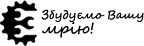
<style>
.page{position:relative;width:144px;height:46px;background:#ffffff}
.page>*{position:absolute;margin:0}
.t1{font:11.7px "SegoeScript";color:#000000}
.t2{font:15.4px "SegoeScript";color:#000000}
</style>
<div class="page">
<p class="t1" style="left:41px;top:9px;width:103px;height:13px">Збудуємо Вашу</p>
<p class="t2" style="left:42px;top:22px;width:52px;height:16px">мрію!</p>
</div>
